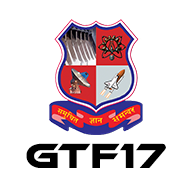
<style>
.page{position:relative;width:192px;height:192px;background:#ffffff}
.page>*{position:absolute;margin:0}
.t1{font:36px "EthnocentricRg-Regular";color:#000000}
</style>
<div class="page">
<p class="t1" style="left:26px;top:143px;width:140px;height:25px">GTF17</p>
</div>
